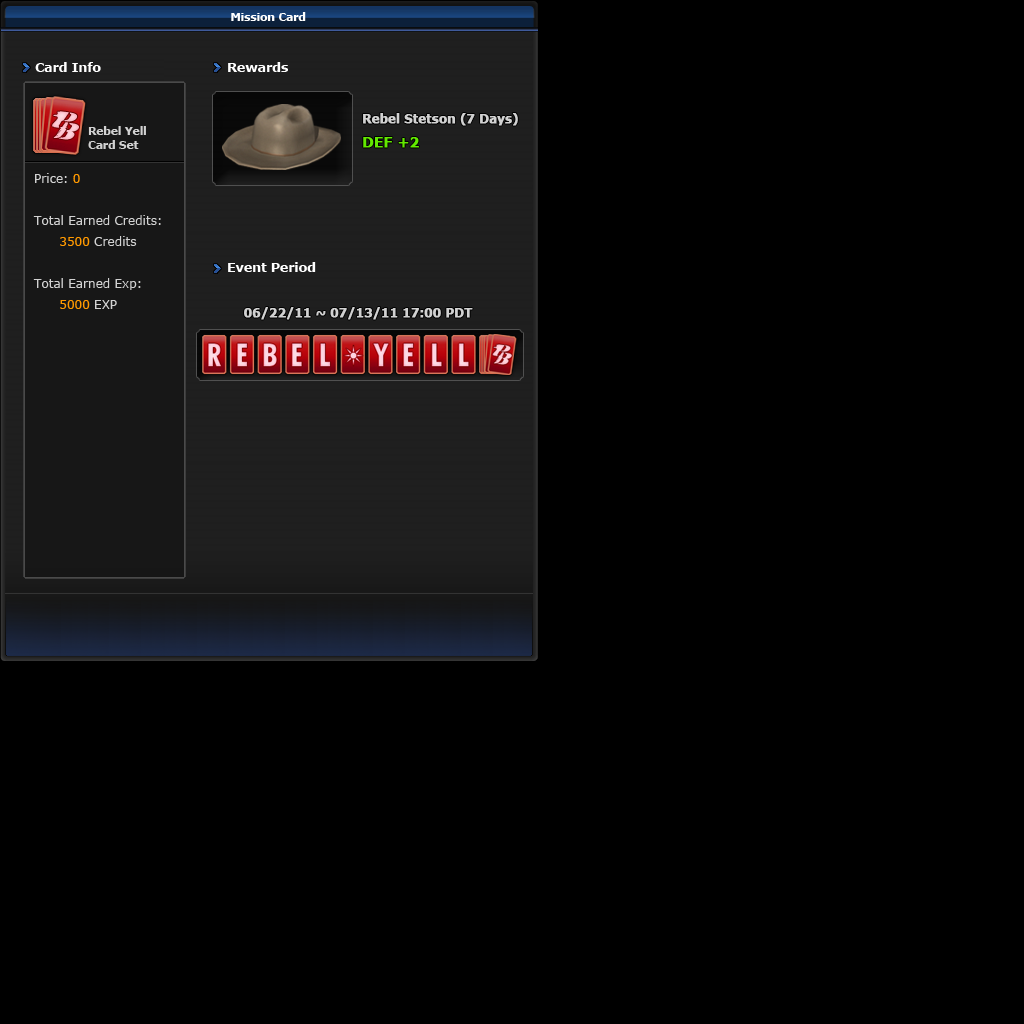
<style>
.page{position:relative;width:1024px;height:1024px;background:#000000}
.page>*{position:absolute;margin:0}
.t1{font:11px "Verdana-Bold";letter-spacing:-0.025em;color:#ffffff}
.t2{font:13px "Verdana-Bold";letter-spacing:-0.025em;color:#ffffff}
.t3{font:12px "Verdana-Bold";letter-spacing:-0.025em;color:#d2d2d2;font-weight:bold}
.t4{font:11px/14px "Verdana-Bold";letter-spacing:-0.025em;color:#d2d2d2}
.t5{font:14px "Verdana-Bold";letter-spacing:-0.025em;color:#63e900;font-weight:bold}
.t6{font:12px "Verdana";color:#d2d2d2}
.t7{font:12px "Verdana";color:#ff9900}
</style>
<div class="page">
<p class="t1" style="left:231px;top:12px;width:75px;height:9px">Mission Card</p>
<p class="t2" style="left:35px;top:62px;width:66px;height:10px">Card Info</p>
<p class="t2" style="left:228px;top:62px;width:60px;height:10px">Rewards</p>
<p class="t3" style="left:363px;top:113px;width:155px;height:13px">Rebel Stetson (7 Days)</p>
<p class="t4" style="left:88px;top:126px;width:58px;height:23px">Rebel Yell<br>Card Set</p>
<p class="t5" style="left:363px;top:137px;width:56px;height:11px">DEF +2</p>
<p class="t6" style="left:33px;top:173px;width:128px;height:136px">Price: <span class="t7">0<br><br></span>Total Earned Credits: <br><span class="t7">      3500 </span>Credits<br><br>Total Earned Exp:<br>      <span class="t7">5000</span> EXP</p>
<p class="t2" style="left:228px;top:262px;width:88px;height:10px">Event Period</p>
<p class="t3" style="left:244px;top:307px;width:229px;height:13px">06/22/11 ~ 07/13/11 17:00 PDT</p>
</div>
